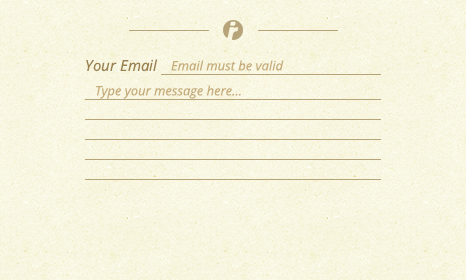
<style>
.page{position:relative;width:466px;height:280px}
.page>*{position:absolute;margin:0}
.t1{font:15px "OpenSans-Italic";color:#9a804e}
.t2{font:13px "OpenSans-Italic";color:#c6ac7a}
</style>
<div class="page">
<p class="t1" style="left:86px;top:59px;width:72px;height:13px">Your Email</p>
<p class="t2" style="left:171px;top:60px;width:113px;height:11px">Email must be valid</p>
<p class="t2" style="left:96px;top:85px;width:145px;height:14px">Type your message here...</p>
</div>
